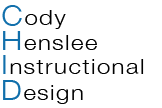
<style>
.page{position:relative;width:162px;height:108px;background:#ffffff}
.page>*{position:absolute;margin:0}
.t1{font:21.4px "HelveticaNeue-Light";letter-spacing:0.06em;color:#000000;scale:1.12 1}
.t2{font:26.7px "HelveticaNeue-Light";letter-spacing:0.06em;color:#1270ac;scale:1.12 1}
.t3{font:26.7px "HelveticaNeue-Light";letter-spacing:0.06em;color:#116fab;scale:1.12 1}
</style>
<div class="page">
<p class="t1" style="left:2px;top:5px;width:64px;height:24px"><span class="t2">C</span>ody</p>
<p class="t1" style="left:3px;top:31px;width:94px;height:19px"><span class="t3">H</span>enslee</p>
<p class="t1" style="left:3px;top:55px;width:141px;height:19px"><span class="t3">I</span>nstructional</p>
<p class="t1" style="left:3px;top:80px;width:80px;height:24px"><span class="t3">D</span>esign</p>
</div>
